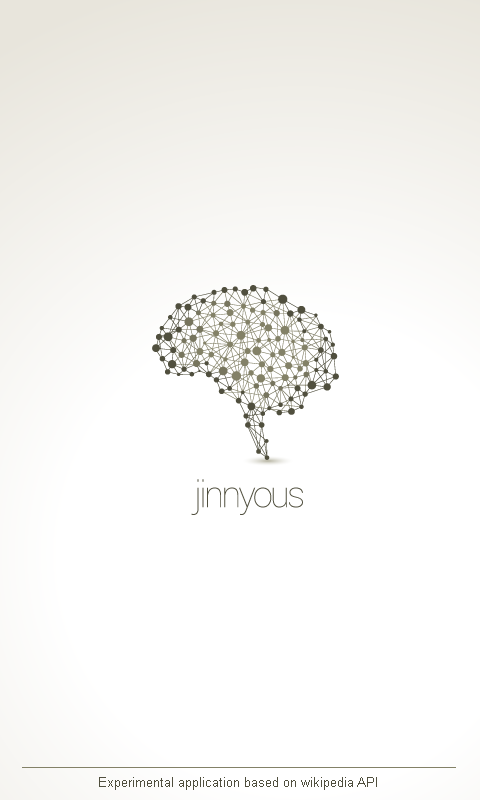
<style>
.page{position:relative;width:480px;height:800px;background:#ffffff}
.page>*{position:absolute;margin:0}
.t1{font:36.8px "Roboto-Thin";letter-spacing:-0.08em;color:#504f3e}
.t2{font:13px "ArialMT";color:#504f3e}
</style>
<div class="page">
<p class="t1" style="left:191px;top:479px;width:112px;height:36px">jinnyous</p>
<p class="t2" style="left:99px;top:777px;width:278px;height:13px">Experimental application based on wikipedia API</p>
</div>
